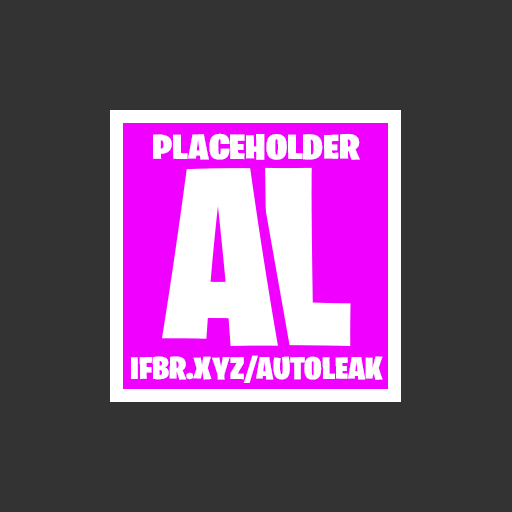
<style>
.page{position:relative;width:512px;height:512px;background:#333333}
.page>*{position:absolute;margin:0}
.t1{font:35.1px "BurbankBigCondensed-Black";color:#ffffff;scale:1.27 1}
.t2{font:31.5px "BurbankBigCondensed-Black";color:#ffffff;scale:1.18 1}
</style>
<div class="page">
<p class="t1" style="left:153px;top:133px;width:207px;height:27px">PLACEHOLDER</p>
<p class="t2" style="left:131px;top:355px;width:252px;height:28px">IFBR.XYZ/AUTOLEAK</p>
</div>
